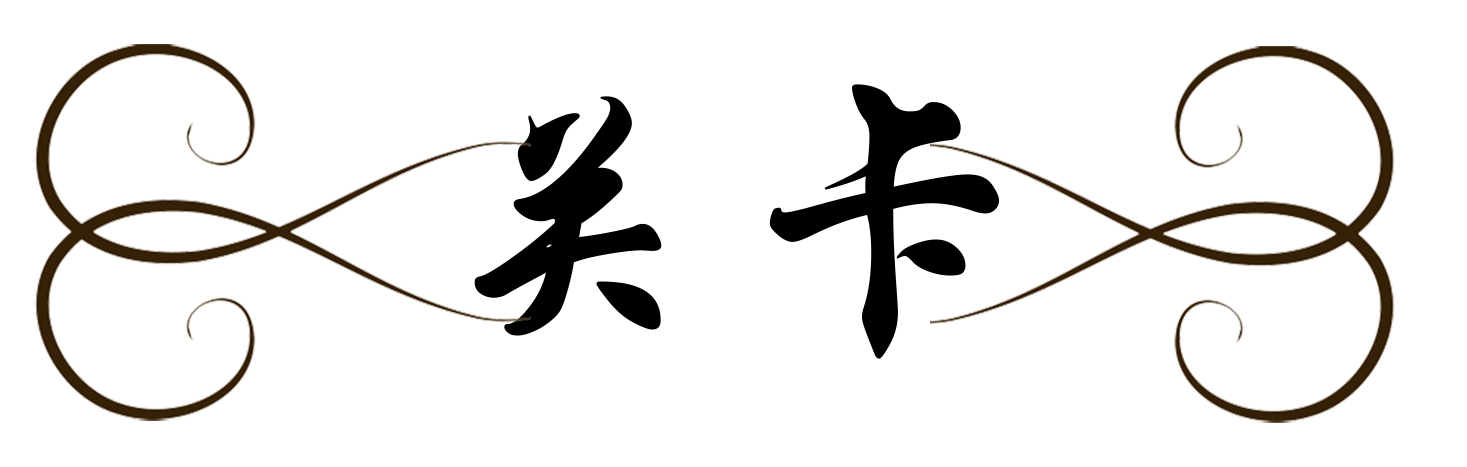
<style>
.page{position:relative;width:1467px;height:467px;background:#ffffff}
.page>*{position:absolute;margin:0}
.t1{font:300px "STXingkai";color:#000000}
</style>
<div class="page">
<p class="t1" style="left:474px;top:84px;width:526px;height:275px">关卡</p>
</div>
